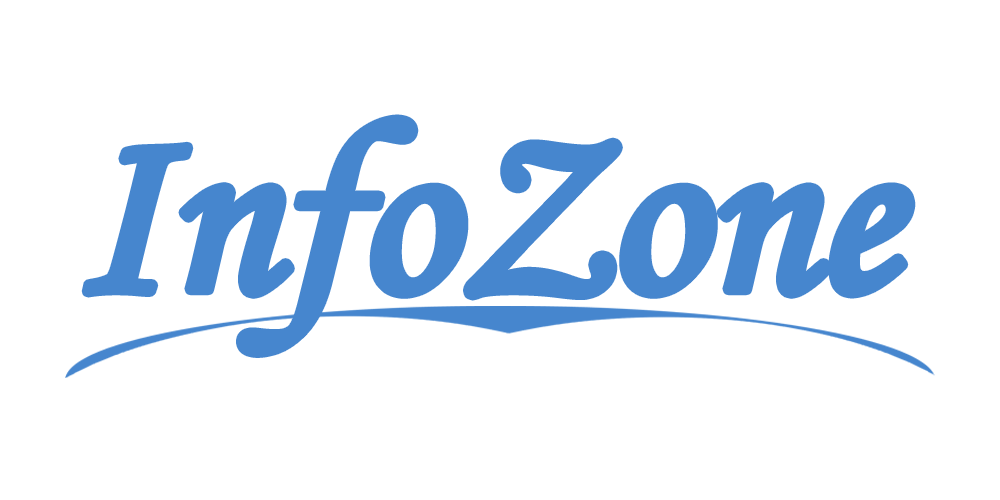
<style>
.page{position:relative;width:1000px;height:500px;background:#ffffff}
.page>*{position:absolute;margin:0}
.t1{font:244.6px "MonotypeCorsiva";color:#4686ce}
</style>
<div class="page">
<p class="t1" style="left:87px;top:120px;width:823px;height:232px">InfoZone</p>
</div>
